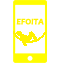
<style>
.page{position:relative;width:64px;height:64px;background:#ffffff}
.page>*{position:absolute;margin:0}
.t1{font:8.6px "ErasITC-Bold";color:#fff200;text-transform:uppercase;scale:0.8 1}
</style>
<div class="page">
<p class="t1" style="left:16px;top:18px;width:28px;height:7px">Efoita</p>
</div>
